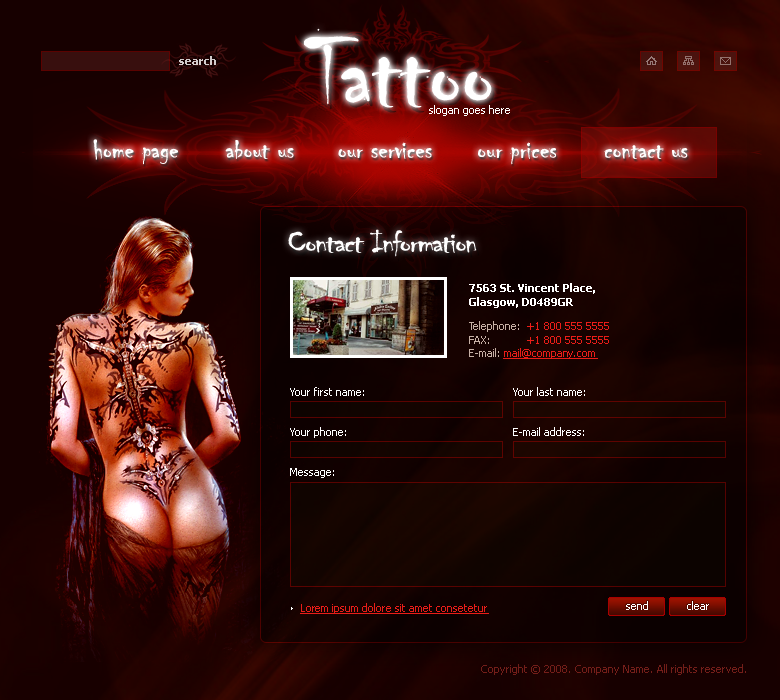
<style>
.page{position:relative;width:780px;height:700px}
.page>*{position:absolute;margin:0}
.t1{font:103.5px "Chiller-Regular";color:#ffffff}
.t2{font:11px "Tahoma-Bold";color:#d1cccc}
.t3{font:11px "Tahoma";color:#ffffff}
.t4{font:28px "Chiller-Regular";color:#ffffff}
.t5{font:32px "Chiller-Regular";letter-spacing:-0.04em;color:#ffffff;scale:1.14 1}
.t6{font:11px "Tahoma-Bold";color:#ffffff}
.t7{font:11px "Tahoma";color:#ea1d18;text-decoration:underline}
.t8{font:11px "Tahoma";color:#c6b0a5}
.t9{font:11px "Tahoma";color:#ea1d18}
.t10{font:11px "Tahoma";color:#741e19}
</style>
<div class="page">
<p class="t1" style="left:303px;top:28px;width:189px;height:80px">Tattoo</p>
<p class="t2" style="left:179px;top:56px;width:37px;height:9px">search</p>
<p class="t3" style="left:429px;top:105px;width:81px;height:11px">slogan goes here</p>
<p class="t4" style="left:93px;top:139px;width:85px;height:26px">home page</p>
<p class="t4" style="left:225px;top:140px;width:69px;height:19px">about us</p>
<p class="t4" style="left:338px;top:142px;width:94px;height:17px">our services</p>
<p class="t4" style="left:478px;top:142px;width:79px;height:23px">our prices</p>
<p class="t4" style="left:604px;top:145px;width:84px;height:14px">contact us</p>
<p class="t5" style="left:288px;top:229px;width:189px;height:28px">Contact Information</p>
<p class="t6" style="left:469px;top:283px;width:126px;height:25px">7563 St. Vincent Place,<br>Glasgow, D0489GR</p>
<p class="t7" style="left:469px;top:321px;width:140px;height:38px"><span class="t8">Telephone:  </span><span class="t9">+1 800 555 5555<br></span><span class="t8">FAX:            </span><span class="t9">+1 800 555 5555<br></span><span class="t8">E-mail: </span>mail@company.com</p>
<p class="t3" style="left:290px;top:387px;width:74px;height:9px">Your first name:</p>
<p class="t3" style="left:513px;top:387px;width:72px;height:9px">Your last name:</p>
<p class="t3" style="left:290px;top:427px;width:56px;height:11px">Your phone:</p>
<p class="t3" style="left:513px;top:427px;width:71px;height:9px">E-mail address:</p>
<p class="t3" style="left:290px;top:468px;width:44px;height:10px">Message:</p>
<p class="t7" style="left:300px;top:603px;width:189px;height:11px">Lorem ipsum dolore sit amet consetetur</p>
<p class="t3" style="left:626px;top:601px;width:22px;height:9px">send</p>
<p class="t3" style="left:687px;top:601px;width:22px;height:9px">clear</p>
<p class="t10" style="left:481px;top:664px;width:265px;height:11px">Copyright © 2008. Company Name. All rights reserved.</p>
</div>
